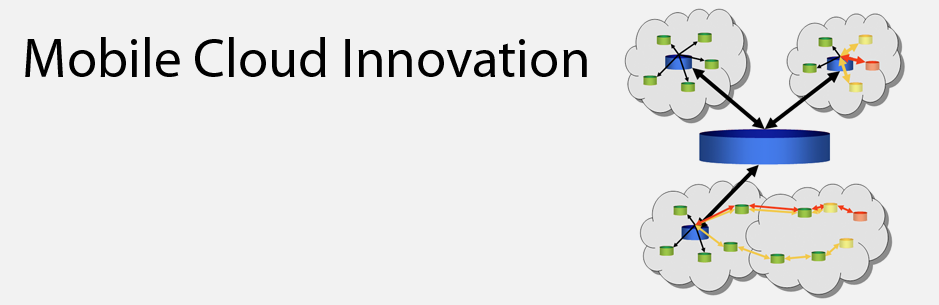
<style>
.page{position:relative;width:939px;height:305px;background:#f2f2f2}
.page>*{position:absolute;margin:0}
.t1{font:55px "MyriadPro-Regular";color:#000000}
</style>
<div class="page">
<p class="t1" style="left:25px;top:37px;width:562px;height:40px">Mobile Cloud Innovation</p>
</div>
